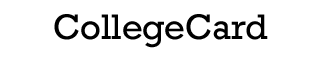
<style>
.page{position:relative;width:320px;height:58px;background:#ffffff}
.page>*{position:absolute;margin:0}
.t1{font:36.3px "Rockwell";color:#000000}
</style>
<div class="page">
<p class="t1" style="left:54px;top:14px;width:214px;height:34px">CollegeCard</p>
</div>
